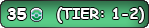
<style>
.page{position:relative;width:149px;height:28px}
.page>*{position:absolute;margin:0}
.t1{font:12px "ComicSansMS-Bold";color:#ffffff}
.t2{font:14.7px "ComicSansMS-Bold";color:#ffffff}
</style>
<div class="page">
<p class="t1" style="left:7px;top:8px;width:20px;height:12px">35</p>
<p class="t2" style="left:57px;top:7px;width:87px;height:16px">(TIER: 1-2)</p>
</div>
